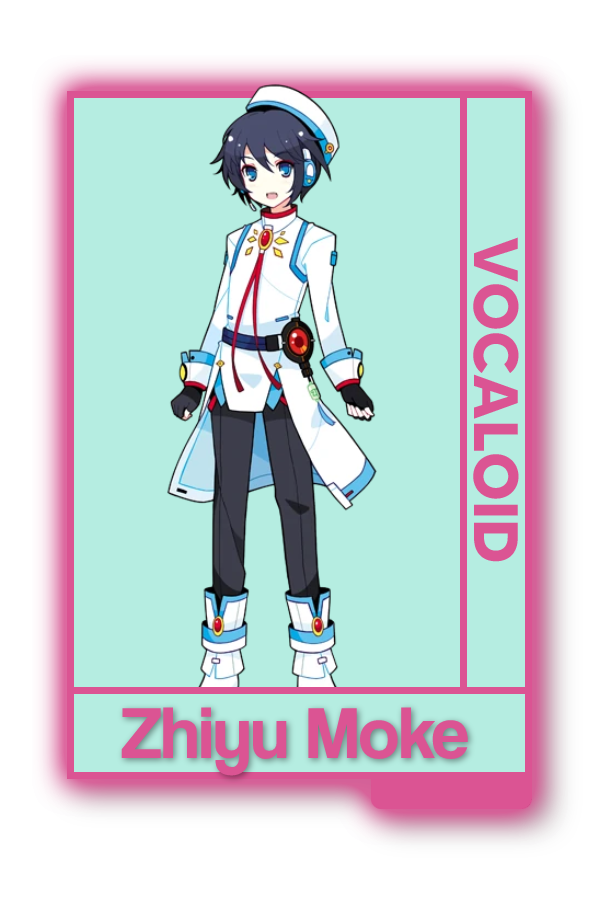
<style>
.page{position:relative;width:600px;height:900px;background:#b5ede1}
.page>*{position:absolute;margin:0}
.t1{font:62.5px "MADETOMMY-Bold";color:#db5493}
.t2{font:75px "CoolveticaRg-Regular";color:#db5493}
</style>
<div class="page">
<p class="t1" style="left:473px;top:237px;width:46px;height:325px;rotate:90deg">VOCALOID</p>
<p class="t2" style="left:121px;top:707px;width:347px;height:69px">Zhiyu Moke</p>
</div>
